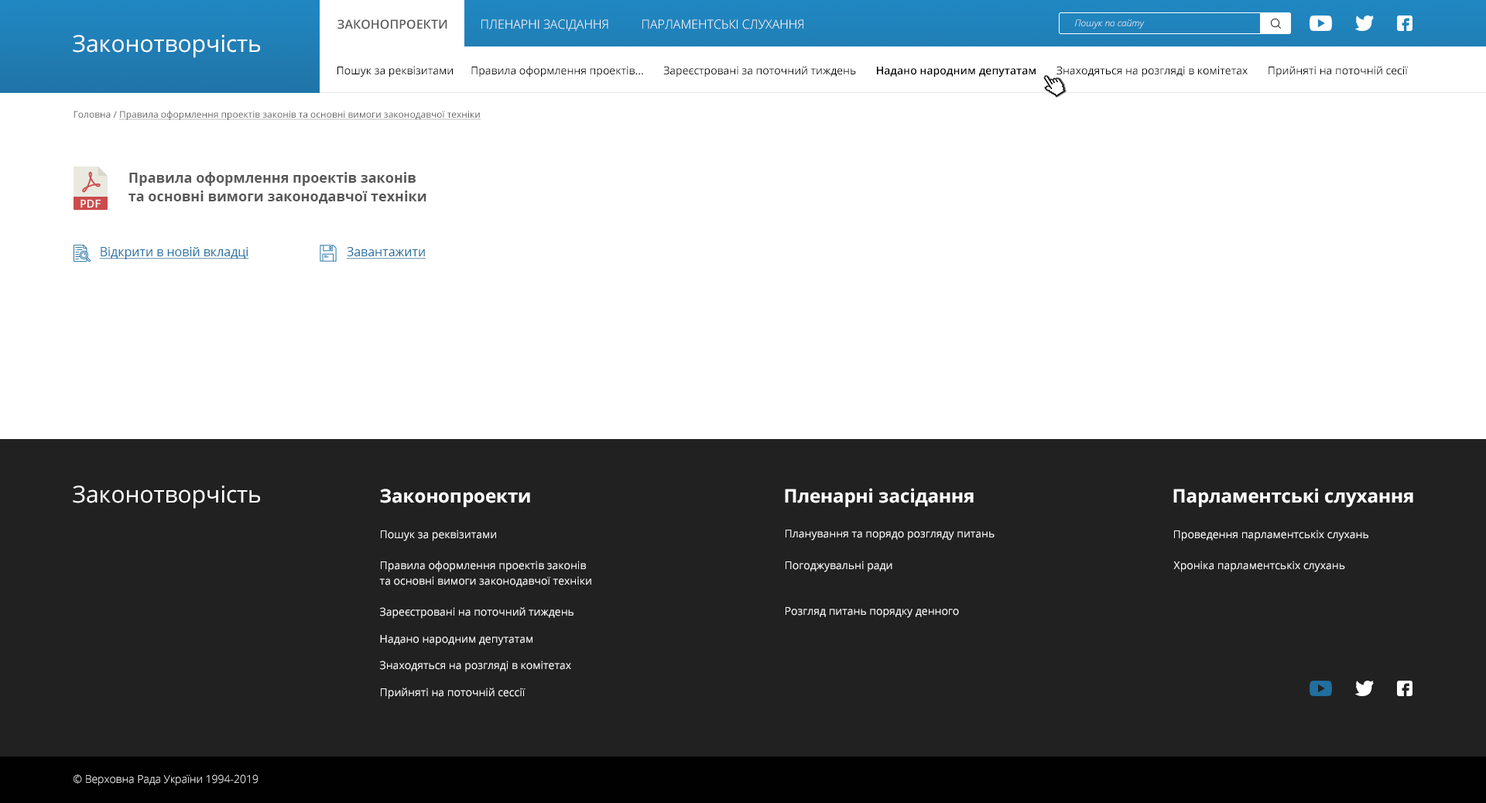
<style>
.page{position:relative;width:1486px;height:803px;background:#ffffff}
.page>*{position:absolute;margin:0}
.t1{font:12.4px "OpenSans-SemiBold";color:#585858;text-transform:uppercase}
.t2{font:12.4px "OpenSans-Light";color:#ffffff;text-transform:uppercase}
.t3{font:9.3px "OpenSans-LightItalic";color:#ffffff}
.t4{font:23.2px "OpenSans-Regular";color:#ffffff}
.t5{font:10.8px "OpenSans-Regular";color:#000000}
.t6{font:10.8px "OpenSans-SemiBold";color:#000000}
.t7{font:9.3px "OpenSans-Regular";color:#585858;text-decoration:underline}
.t8{font:9.3px "OpenSans-Regular";color:#585858}
.t9{font:13.9px/18.6px "OpenSans-Bold";color:#585858}
.t10{font:12.4px "OpenSans-Regular";color:#216f9f;text-decoration:underline}
.t11{font:18.6px "OpenSans-Bold";color:#ffffff}
.t12{font:10.8px "OpenSans-Regular";color:#ffffff}
.t13{font:10.8px/15.5px "OpenSans-Regular";color:#ffffff}
.t14{font:10.8px/20.1px "OpenSans-Regular";color:#ffffff}
.t15{font:10.8px "OpenSans-Light";color:#ffffff}
</style>
<div class="page">
<p class="t1" style="left:337px;top:19px;width:110px;height:10px">Законопроекти</p>
<p class="t2" style="left:481px;top:19px;width:127px;height:12px">пленарні засідання</p>
<p class="t2" style="left:642px;top:19px;width:161px;height:10px">парламентські слухання</p>
<p class="t3" style="left:1075px;top:19px;width:70px;height:10px">Пошук по сайту</p>
<p class="t4" style="left:73px;top:35px;width:187px;height:23px">Законотворчість</p>
<p class="t5" style="left:337px;top:66px;width:1071px;height:11px">Пошук за реквізитами      Правила оформлення проектів...       Зареєстровані за поточний тиждень       <span class="t6">Надано народним депутатам</span>       Знаходяться на розгляді в комітетах       Прийняті на поточній сесії</p>
<p class="t7" style="left:74px;top:111px;width:407px;height:9px"><span class="t8">Головна / </span>Правила оформлення проектів законів та основні вимоги законодавчої техніки</p>
<p class="t9" style="left:128px;top:172px;width:298px;height:32px">Правила оформлення проектів законів <br>та основні вимоги законодавчої техніки</p>
<p class="t10" style="left:99px;top:247px;width:150px;height:12px">Відкрити в новій вкладці</p>
<p class="t10" style="left:346px;top:247px;width:80px;height:12px">Завантажити</p>
<p class="t4" style="left:73px;top:485px;width:187px;height:23px">Законотворчість</p>
<p class="t11" style="left:380px;top:488px;width:150px;height:19px">Законопроекти</p>
<p class="t11" style="left:785px;top:488px;width:189px;height:19px">Пленарні засідання</p>
<p class="t11" style="left:1173px;top:488px;width:240px;height:19px">Парламентські слухання</p>
<p class="t12" style="left:381px;top:529px;width:115px;height:12px">Пошук за реквізитами</p>
<p class="t12" style="left:785px;top:529px;width:209px;height:11px">Планування та порядо розгляду питань</p>
<p class="t12" style="left:1174px;top:529px;width:194px;height:12px">Проведення парламентськіх слухань</p>
<p class="t13" style="left:379px;top:560px;width:212px;height:27px"><span class="t14">Правила оформлення проектів законів<br></span>та основні вимоги законодавчої техніки</p>
<p class="t12" style="left:785px;top:560px;width:107px;height:12px">Погоджувальні ради</p>
<p class="t12" style="left:1173px;top:560px;width:172px;height:12px">Хроніка парламентськіх слухань</p>
<p class="t12" style="left:380px;top:607px;width:193px;height:11px">Зареєстровані на поточний тиждень</p>
<p class="t12" style="left:785px;top:607px;width:174px;height:11px">Розгляд питань порядку денного</p>
<p class="t12" style="left:380px;top:635px;width:152px;height:10px">Надано народним депутатам</p>
<p class="t12" style="left:380px;top:660px;width:191px;height:12px">Знаходяться на розгляді в комітетах</p>
<p class="t12" style="left:381px;top:687px;width:144px;height:12px">Прийняті на поточній сессії</p>
<p class="t15" style="left:74px;top:774px;width:184px;height:11px">© Верховна Рада України 1994-2019</p>
</div>
